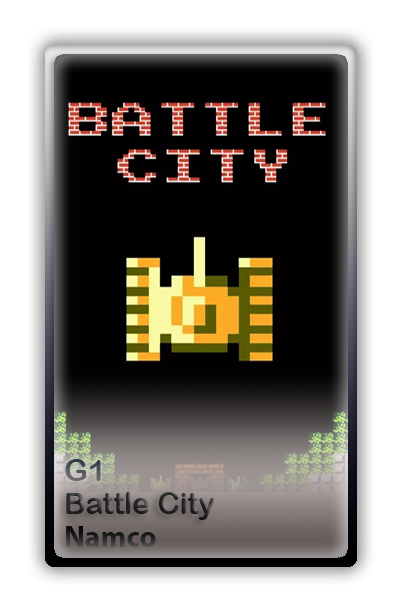
<style>
.page{position:relative;width:402px;height:603px}
.page>*{position:absolute;margin:0}
.t1{font:30px "ArialRoundedMTBold"}
.t2{font:30px "ArialRoundedMTBold";color:#242424}
.t3{font:30px "MyriadPro-Bold";color:#242424}
</style>
<div class="page">
<p class="t1" style="left:65px;top:459px;width:36px;height:22px">G1</p>
<p class="t2" style="left:66px;top:492px;width:148px;height:28px">Battle City</p>
<p class="t3" style="left:66px;top:526px;width:90px;height:21px">Namco</p>
</div>
